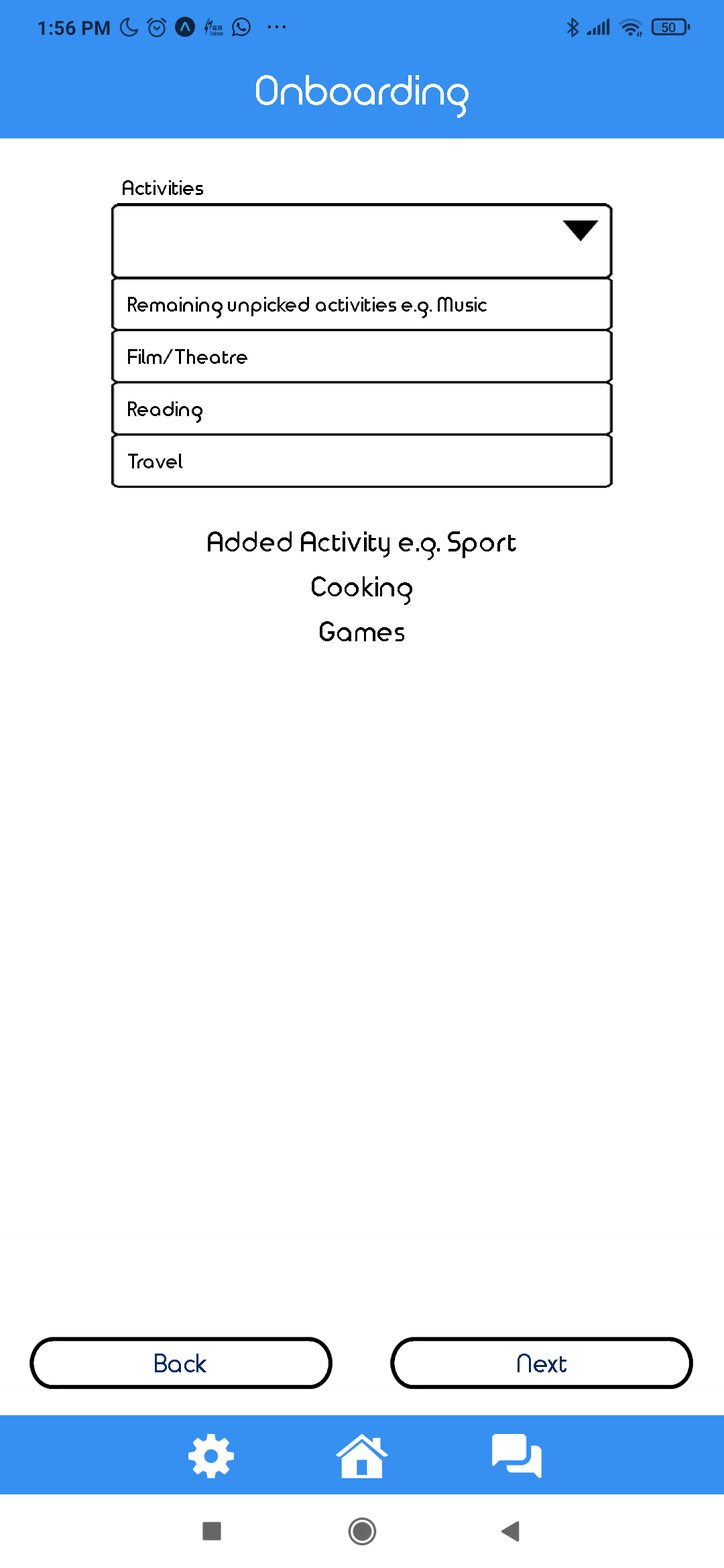
<style>
.page{position:relative;width:724px;height:1568px;background:#ffffff}
.page>*{position:absolute;margin:0}
.t1{font:20.1px "TimeBurner-Bold";color:#000000}
.t2{font:27.5px "TimeBurner-Bold";color:#000000}
</style>
<div class="page">
<p class="t1" style="left:123px;top:180px;width:80px;height:15px">Activities</p>
<p class="t1" style="left:128px;top:297px;width:358px;height:21px">Remaining unpicked activities e.g. Music</p>
<p class="t1" style="left:128px;top:349px;width:119px;height:15px">Film/Theatre</p>
<p class="t1" style="left:128px;top:401px;width:74px;height:22px">Reading</p>
<p class="t1" style="left:128px;top:454px;width:54px;height:14px">Travel</p>
<p class="t2" style="left:208px;top:531px;width:308px;height:29px">Added Activity e.g. Sport</p>
<p class="t2" style="left:312px;top:576px;width:100px;height:29px">Cooking</p>
<p class="t2" style="left:320px;top:621px;width:84px;height:20px">Games</p>
</div>
